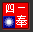
<style>
.page{position:relative;width:33px;height:32px;background:#f20000}
.page>*{position:absolute;margin:0}
.t1{font:10.4px "SimSun";color:#ffffff}
.t2{font:11.7px "SimSun";color:#ffffff}
</style>
<div class="page">
<p class="t1" style="left:6px;top:4px;width:19px;height:9px">四一</p>
<p class="t2" style="left:16px;top:15px;width:11px;height:12px">奉</p>
</div>
